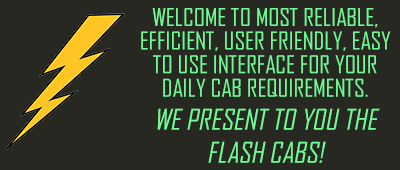
<style>
.page{position:relative;width:400px;height:170px;background:#272822}
.page>*{position:absolute;margin:0}
.t1{font:23.6px/23.6px "AgencyFB-Reg";color:#70f993;text-transform:uppercase;scale:1.06 1}
.t2{font:27.5px "AgencyFB-Reg";color:#70f993;text-transform:uppercase;font-style:italic;scale:1.06 1}
</style>
<div class="page">
<p class="t1" style="left:141px;top:8px;width:250px;height:155px;text-align:center">Welcome to most reliable,   efficient, user friendly, easy to use interface for your daily cab requirements.<br><span class="t2">We present to you the flash cabs!</span></p>
</div>
